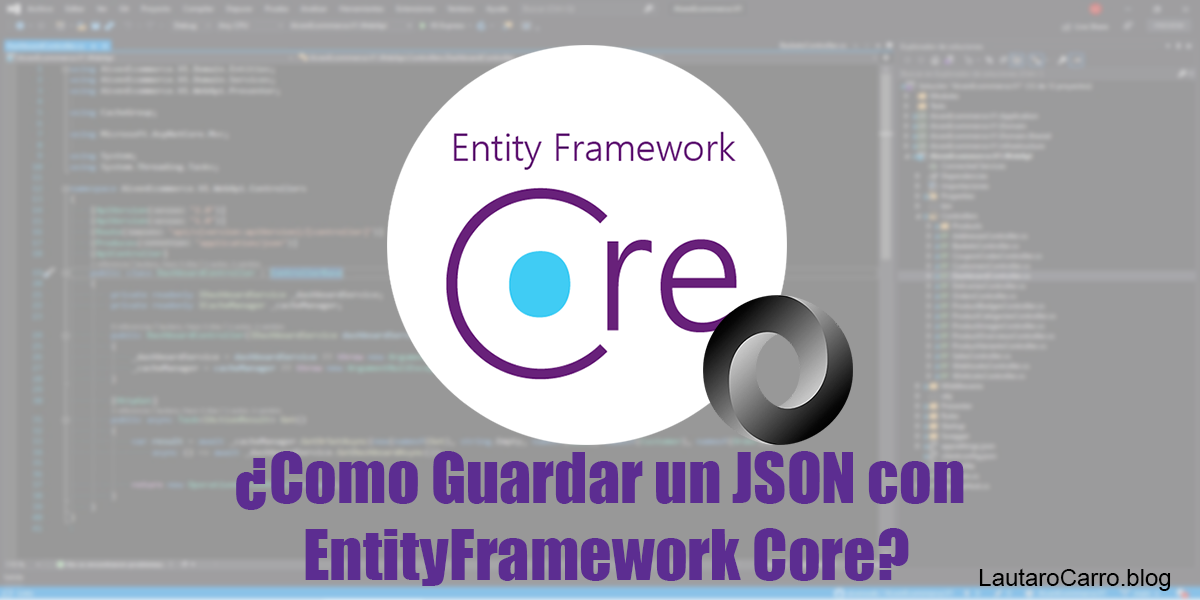
<style>
.page{position:relative;width:1200px;height:600px;background:#989898}
.page>*{position:absolute;margin:0}
.t1{font:64px "Impact";color:#5c2d91}
.t2{font:24px "ArialMT";color:#000000}
</style>
<div class="page">
<p class="t1" style="left:236px;top:451px;width:728px;height:135px;text-align:center">¿Como Guardar un JSON con <br>EntityFramework Core?</p>
<p class="t2" style="left:979px;top:568px;width:192px;height:23px">LautaroCarro.blog</p>
</div>
